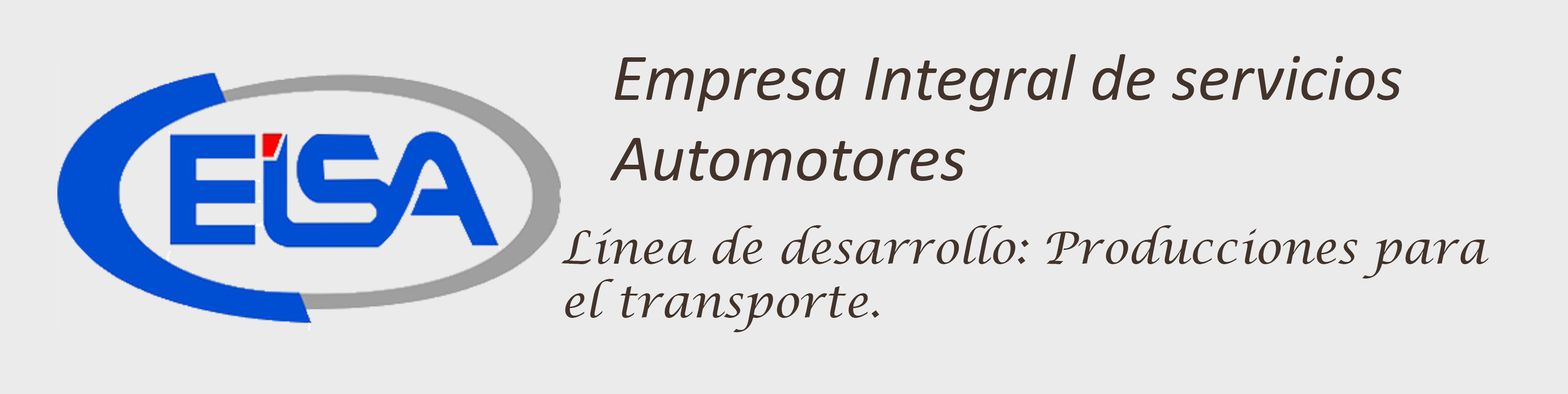
<style>
.page{position:relative;width:1568px;height:394px;background:#ebebeb}
.page>*{position:absolute;margin:0}
.t1{font:67.1px "Calibri-Italic";color:#43332a}
.t2{font:44.8px "LucidaCalligraphy-Italic";color:#43332a}
</style>
<div class="page">
<p class="t1" style="left:610px;top:54px;width:791px;height:127px">Empresa Integral de servicios Automotores</p>
<p class="t2" style="left:561px;top:225px;width:928px;height:107px">Línea de desarrollo: Producciones para el transporte.</p>
</div>
